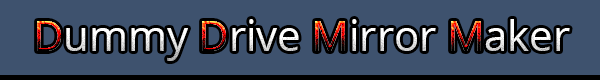
<style>
.page{position:relative;width:600px;height:80px;background:#3e526e}
.page>*{position:absolute;margin:0}
.t1{font:41.7px "OpenSans"}
</style>
<div class="page">
<p class="t1" style="left:37px;top:19px;width:533px;height:42px">Dummy Drive Mirror Maker</p>
<p class="t1" style="left:37px;top:21px;width:24px;height:30px">D</p>
<p class="t1" style="left:202px;top:21px;width:24px;height:30px">D</p>
<p class="t1" style="left:315px;top:21px;width:30px;height:30px">M</p>
<p class="t1" style="left:451px;top:21px;width:30px;height:30px">M</p>
</div>
